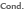
<style>
.page{position:relative;width:24px;height:12px;background:#ffffff}
.page>*{position:absolute;margin:0}
.t1{font:9px "AmiraParadiso";color:#646464}
</style>
<div class="page">
<p class="t1" style="left:0px;top:2px;width:24px;height:7px">Cond.</p>
</div>
